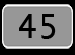
<style>
.page{position:relative;width:75px;height:55px;background:#979797}
.page>*{position:absolute;margin:0}
.t1{font:36px "Shruti";color:#000000}
</style>
<div class="page">
<p class="t1" style="left:19px;top:14px;width:37px;height:25px">45</p>
</div>
